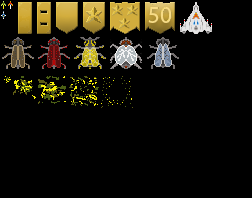
<style>
.page{position:relative;width:252px;height:198px;background:#000000}
.page>*{position:absolute;margin:0}
.t1{font:23.3px "MyriadPro-Regular";color:#f7dc87}
</style>
<div class="page">
<p class="t1" style="left:148px;top:7px;width:24px;height:16px">50</p>
</div>
